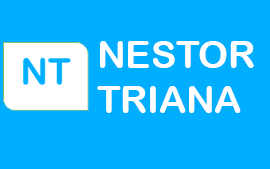
<style>
.page{position:relative;width:270px;height:169px;background:#00aeff}
.page>*{position:absolute;margin:0}
.t1{font:37.5px "ArialRoundedMTBold";color:#ffffff}
</style>
<div class="page">
<p class="t1" style="left:97px;top:41px;width:157px;height:72px">NESTOR <br>TRIANA</p>
</div>
